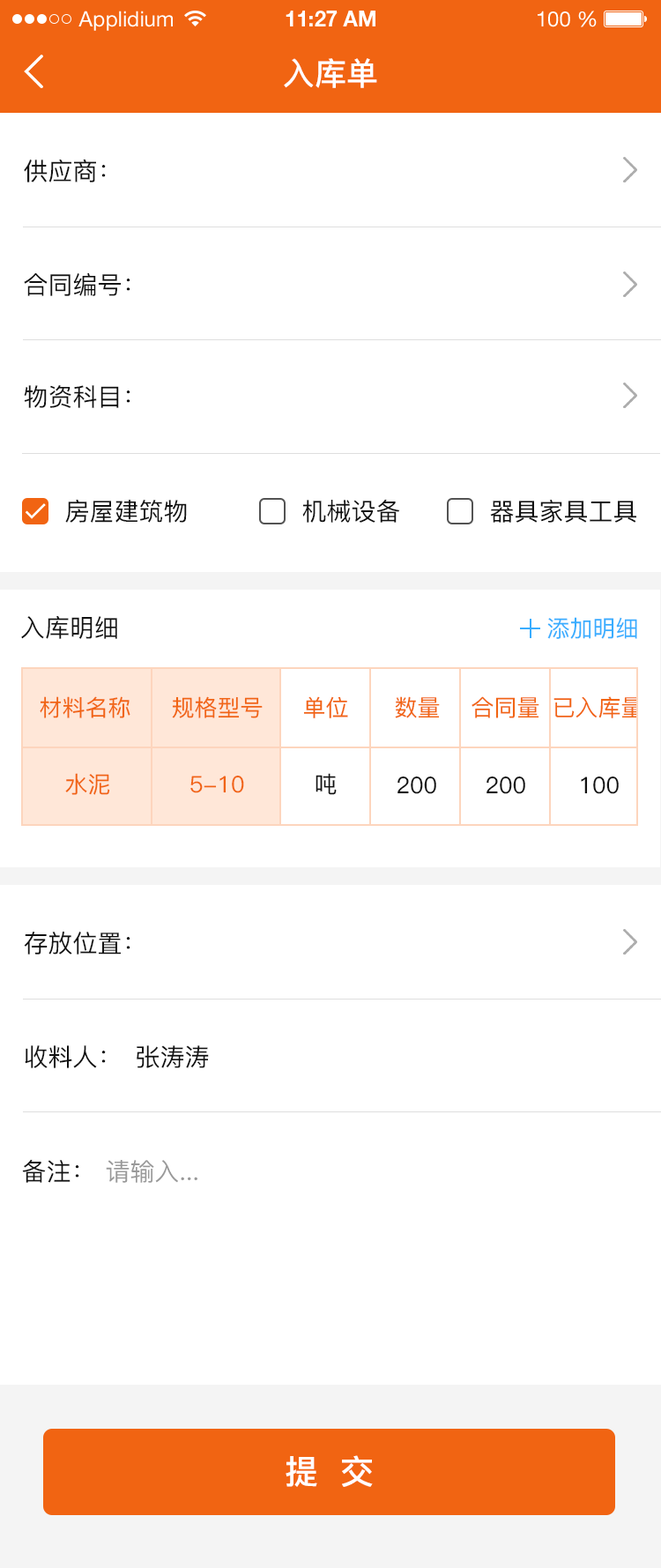
<style>
.page{position:relative;width:661px;height:1568px;background:#ffffff}
.page>*{position:absolute;margin:0}
.t1{font:31.7px "PingFang-SC-Bold";color:#ffffff}
.t2{font:24.7px "PingFang-SC-Medium";color:#111111}
.t3{font:22.9px "PingFang-SC-Medium";color:#38adff}
.t4{font:22.9px "PingFang-SC-Medium";color:#f16412}
.t5{font:22.9px "PingFang-SC-Medium";color:#111111}
.t6{font:24.7px "PingFang-SC-Medium";color:#999999}
.t7{font:33.5px "PingFang-SC-Bold";color:#ffffff}
</style>
<div class="page">
<p class="t1" style="left:284px;top:58px;width:93px;height:30px">入库单</p>
<p class="t2" style="left:24px;top:159px;width:82px;height:23px">供应商：</p>
<p class="t2" style="left:24px;top:273px;width:106px;height:23px">合同编号：</p>
<p class="t2" style="left:24px;top:385px;width:106px;height:23px">物资科目：</p>
<p class="t2" style="left:65px;top:499px;width:122px;height:24px">房屋建筑物</p>
<p class="t2" style="left:302px;top:499px;width:98px;height:24px">机械设备</p>
<p class="t2" style="left:490px;top:500px;width:146px;height:23px">器具家具工具</p>
<p class="t2" style="left:21px;top:616px;width:96px;height:23px">入库明细</p>
<p class="t3" style="left:547px;top:617px;width:90px;height:22px">添加明细</p>
<p class="t4" style="left:40px;top:696px;width:90px;height:22px">材料名称</p>
<p class="t4" style="left:172px;top:696px;width:91px;height:22px">规格型号</p>
<p class="t4" style="left:303px;top:696px;width:45px;height:22px">单位</p>
<p class="t4" style="left:395px;top:696px;width:45px;height:22px">数量</p>
<p class="t4" style="left:472px;top:696px;width:67px;height:22px">合同量</p>
<p class="t4" style="left:554px;top:696px;width:96px;height:22px">已入库量)</p>
<p class="t4" style="left:65px;top:773px;width:45px;height:22px">水泥</p>
<p class="t5" style="left:316px;top:773px;width:21px;height:22px">吨</p>
<p class="t4" style="left:190px;top:775px;width:54px;height:18px">5-10</p>
<p class="t5" style="left:398px;top:776px;width:38px;height:18px">200</p>
<p class="t5" style="left:487px;top:776px;width:38px;height:18px">200</p>
<p class="t5" style="left:581px;top:776px;width:38px;height:18px">100</p>
<p class="t2" style="left:24px;top:931px;width:106px;height:24px">存放位置：</p>
<p class="t2" style="left:25px;top:1045px;width:81px;height:23px">收料人：</p>
<p class="t2" style="left:137px;top:1045px;width:72px;height:23px">张涛涛</p>
<p class="t2" style="left:22px;top:1159px;width:57px;height:24px">备注：</p>
<p class="t6" style="left:106px;top:1160px;width:91px;height:23px">请输入...</p>
<p class="t7" style="left:286px;top:1455px;width:87px;height:32px">提  交</p>
</div>
